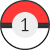
<style>
.page{position:relative;width:50px;height:50px;background:#ffffff}
.page>*{position:absolute;margin:0}
.t1{font:18px "Lato-Light"}
</style>
<div class="page">
<p class="t1" style="left:21px;top:18px;width:8px;height:14px">1</p>
</div>
